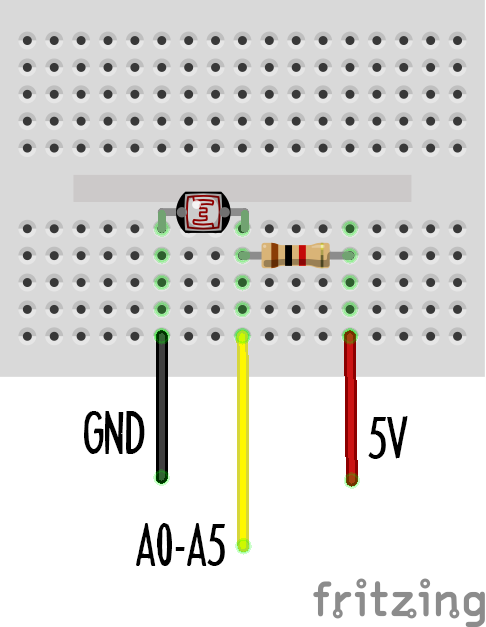
<style>
.page{position:relative;width:486px;height:627px;background:#d9d9d9}
.page>*{position:absolute;margin:0}
.t1{font:52.5px "HeadlineTwoHPLHS";color:#000000}
</style>
<div class="page">
<p class="t1" style="left:84px;top:411px;width:61px;height:43px">GND</p>
<p class="t1" style="left:368px;top:416px;width:40px;height:43px">5V</p>
<p class="t1" style="left:136px;top:523px;width:89px;height:43px">A0-A5</p>
</div>
